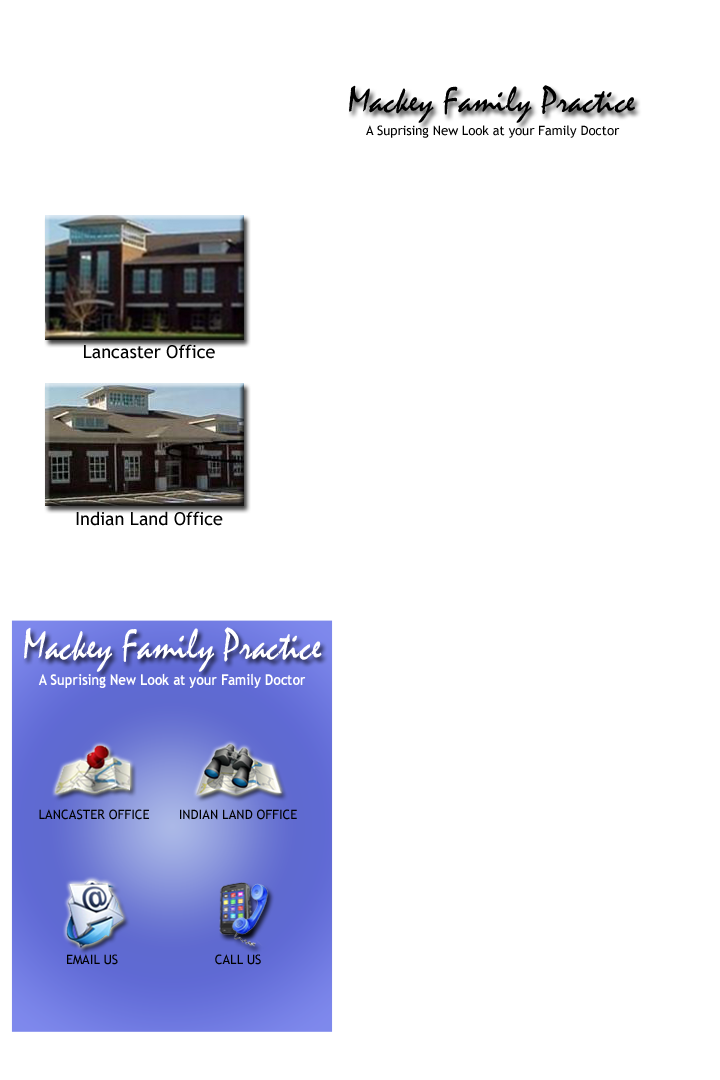
<style>
.page{position:relative;width:720px;height:1080px;background:#ffffff}
.page>*{position:absolute;margin:0}
.t1{font:37px "Mistral";color:#000000}
.t2{font:13px "TrebuchetMS";color:#000000}
.t3{font:18px "TrebuchetMS";color:#000000}
.t4{font:44px "Mistral";color:#ffffff;scale:0.87 1}
.t5{font:15px "TrebuchetMS-Bold";color:#ffffff;scale:0.87 1}
</style>
<div class="page">
<p class="t1" style="left:349px;top:85px;width:286px;height:38px">Mackey Family Practice</p>
<p class="t2" style="left:366px;top:125px;width:254px;height:13px"><span class="t1"><br></span>A Suprising New Look at your Family Doctor</p>
<p class="t3" style="left:84px;top:344px;width:131px;height:15px">Lancaster Office</p>
<p class="t3" style="left:76px;top:511px;width:147px;height:15px">Indian Land Office</p>
<p class="t4" style="left:24px;top:627px;width:298px;height:45px">Mackey Family Practice</p>
<p class="t5" style="left:38px;top:673px;width:268px;height:15px"><span class="t4"><br></span>A Suprising New Look at your Family Doctor</p>
<p class="t2" style="left:39px;top:809px;width:110px;height:11px">LANCASTER OFFICE</p>
<p class="t2" style="left:180px;top:809px;width:117px;height:11px">INDIAN LAND OFFICE</p>
<p class="t2" style="left:67px;top:954px;width:51px;height:11px">EMAIL US</p>
<p class="t2" style="left:215px;top:954px;width:46px;height:11px">CALL US</p>
</div>
